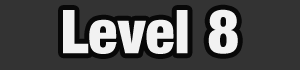
<style>
.page{position:relative;width:300px;height:70px;background:#333333}
.page>*{position:absolute;margin:0}
.t1{font:60px "Harvest";color:#f2f2f2}
</style>
<div class="page">
<p class="t1" style="left:63px;top:9px;width:175px;height:45px">Level 8</p>
</div>
